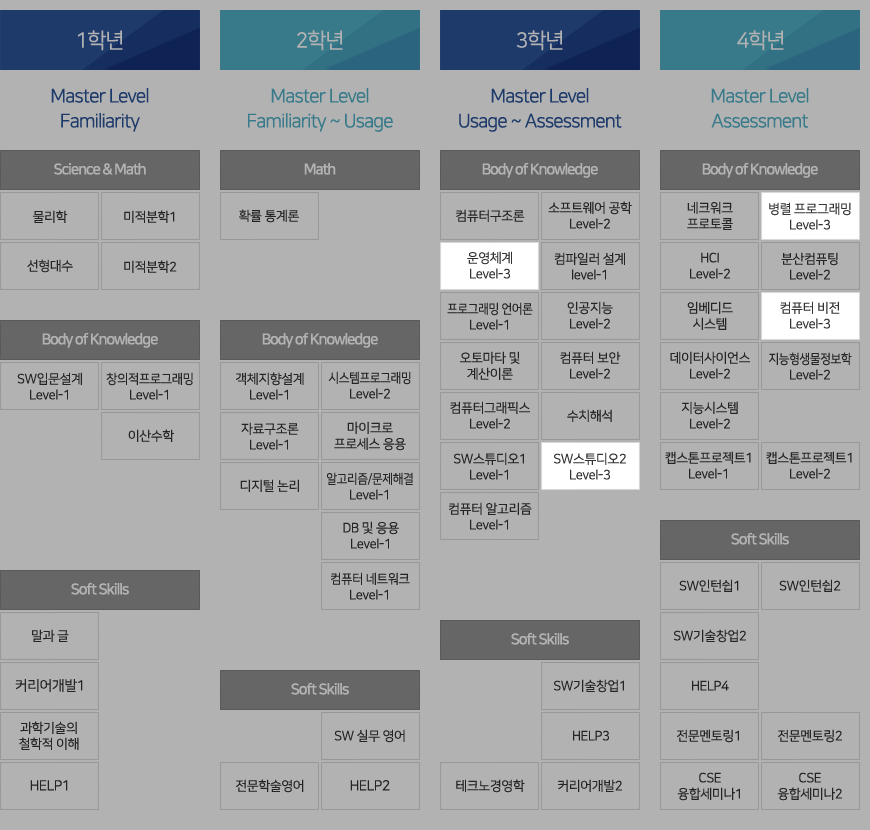
<style>
.page{position:relative;width:870px;height:830px;background:#b2b2b2}
.page>*{position:absolute;margin:0}
.t1{font:21px "NanumSquareR";letter-spacing:-0.05em;color:#b2b2b2}
.t2{font:19px/25px "NanumSquareR";letter-spacing:-0.05em;color:#1e3a6a}
.t3{font:19px/25px "NanumSquareR";letter-spacing:-0.05em;color:#387a8a}
.t4{font:15px "NanumSquareB";letter-spacing:-0.075em;color:#b2b2b2}
.t5{font:13px "NanumSquareR";letter-spacing:-0.025em;color:#333333}
.t6{font:13px/16px "NanumSquareR";letter-spacing:-0.025em;color:#333333}
.t7{font:13px/16px "NanumSquareR";letter-spacing:-0.025em;color:#333333;scale:0.9 1}
.t8{font:13px/16px "NanumSquareR";letter-spacing:-0.025em;color:#333333;scale:0.95 1}
.t9{font:14px "NanumSquareR";letter-spacing:-0.025em;color:#333333}
</style>
<div class="page">
<p class="t1" style="left:77px;top:30px;width:46px;height:21px">1학년</p>
<p class="t1" style="left:297px;top:30px;width:46px;height:21px">2학년</p>
<p class="t1" style="left:516px;top:30px;width:47px;height:21px">3학년</p>
<p class="t1" style="left:737px;top:30px;width:47px;height:21px">4학년</p>
<p class="t2" style="left:51px;top:88px;width:98px;height:44px;text-align:center">Master Level<br>Familiarity</p>
<p class="t3" style="left:248px;top:88px;width:145px;height:44px;text-align:center">Master Level<br>Familiarity ~ Usage</p>
<p class="t2" style="left:459px;top:88px;width:163px;height:44px;text-align:center">Master Level<br>Usage ~ Assessment</p>
<p class="t3" style="left:711px;top:88px;width:98px;height:40px;text-align:center">Master Level<br>Assessment</p>
<p class="t4" style="left:54px;top:163px;width:92px;height:12px">Science &amp; Math</p>
<p class="t4" style="left:304px;top:163px;width:32px;height:12px">Math</p>
<p class="t4" style="left:482px;top:162px;width:116px;height:16px">Body of Knowledge</p>
<p class="t4" style="left:702px;top:162px;width:116px;height:16px">Body of Knowledge</p>
<p class="t5" style="left:239px;top:209px;width:60px;height:14px">확률 통계론</p>
<p class="t5" style="left:456px;top:209px;width:69px;height:13px">컴퓨터구조론</p>
<p class="t6" style="left:548px;top:201px;width:84px;height:28px;text-align:center">소프트웨어 공학<br>Level-2</p>
<p class="t6" style="left:687px;top:201px;width:46px;height:29px;text-align:center">네크워크<br>프로토콜</p>
<p class="t6" style="left:769px;top:202px;width:82px;height:28px;text-align:center">병렬 프로그래밍<br>Level-3</p>
<p class="t5" style="left:33px;top:210px;width:35px;height:13px">물리학</p>
<p class="t5" style="left:124px;top:210px;width:51px;height:13px">미적분학1</p>
<p class="t6" style="left:467px;top:251px;width:45px;height:28px;text-align:center">운영체계<br>Level-3</p>
<p class="t6" style="left:554px;top:252px;width:71px;height:28px;text-align:center">컴파일러 설계<br>level-1</p>
<p class="t6" style="left:690px;top:252px;width:40px;height:27px;text-align:center">HCI<br>Level-2</p>
<p class="t6" style="left:781px;top:252px;width:57px;height:28px;text-align:center">분산컴퓨팅<br>Level-2</p>
<p class="t5" style="left:27px;top:259px;width:46px;height:14px">선형대수</p>
<p class="t5" style="left:124px;top:260px;width:53px;height:13px">미적분학2</p>
<p class="t7" style="left:447px;top:302px;width:86px;height:28px;text-align:center">프로그래밍 언어론<br><span class="t6">Level-1</span></p>
<p class="t6" style="left:567px;top:301px;width:46px;height:28px;text-align:center">인공지능<br>Level-2</p>
<p class="t6" style="left:687px;top:301px;width:46px;height:29px;text-align:center">임베디드<br>시스템</p>
<p class="t6" style="left:780px;top:301px;width:60px;height:28px;text-align:center">컴퓨터 비전<br>Level-3</p>
<p class="t4" style="left:42px;top:332px;width:116px;height:16px">Body of Knowledge</p>
<p class="t4" style="left:262px;top:332px;width:116px;height:16px">Body of Knowledge</p>
<p class="t6" style="left:460px;top:351px;width:60px;height:29px;text-align:center">오토마타 및<br>계산이론</p>
<p class="t6" style="left:560px;top:351px;width:61px;height:28px;text-align:center">컴퓨터 보안<br>Level-2</p>
<p class="t6" style="left:670px;top:351px;width:80px;height:28px;text-align:center">데이터사이언스<br>Level-2</p>
<p class="t7" style="left:769px;top:352px;width:83px;height:28px;text-align:center">지능형생물정보학<br><span class="t6">Level-2</span></p>
<p class="t6" style="left:17px;top:372px;width:65px;height:28px;text-align:center">SW입문설계<br>Level-1</p>
<p class="t8" style="left:106px;top:372px;width:87px;height:28px;text-align:center">창의적프로그래밍<br><span class="t6">Level-1</span></p>
<p class="t6" style="left:236px;top:372px;width:68px;height:28px;text-align:center">객체지향설계<br>Level-1</p>
<p class="t7" style="left:328px;top:371px;width:83px;height:28px;text-align:center">시스템프로그래밍<br><span class="t6">Level-2</span></p>
<p class="t6" style="left:450px;top:401px;width:80px;height:28px;text-align:center">컴퓨터그래픽스<br>Level-2</p>
<p class="t6" style="left:681px;top:401px;width:57px;height:28px;text-align:center">지능시스템<br>Level-2</p>
<p class="t5" style="left:567px;top:409px;width:45px;height:13px">수치해석</p>
<p class="t6" style="left:241px;top:422px;width:58px;height:28px;text-align:center">자료구조론<br>Level-1</p>
<p class="t6" style="left:334px;top:421px;width:72px;height:30px;text-align:center">마이크로<br>프로세스 응용</p>
<p class="t5" style="left:128px;top:429px;width:46px;height:13px">이산수학</p>
<p class="t6" style="left:454px;top:452px;width:70px;height:28px;text-align:center">SW스튜디오1<br>Level-1</p>
<p class="t6" style="left:554px;top:452px;width:72px;height:28px;text-align:center">SW스튜디오2<br>Level-3</p>
<p class="t6" style="left:665px;top:451px;width:86px;height:28px;text-align:center">캡스톤프로젝트1<br>Level-1</p>
<p class="t6" style="left:766px;top:451px;width:86px;height:28px;text-align:center">캡스톤프로젝트1<br>Level-2</p>
<p class="t7" style="left:327px;top:472px;width:86px;height:28px;text-align:center">알고리즘/문제해결<br><span class="t6">Level-1</span></p>
<p class="t5" style="left:240px;top:479px;width:59px;height:13px">디지털 논리</p>
<p class="t6" style="left:449px;top:502px;width:83px;height:28px;text-align:center">컴퓨터 알고리즘<br>Level-1</p>
<p class="t6" style="left:343px;top:521px;width:56px;height:28px;text-align:center">DB 및 응용<br>Level-1</p>
<p class="t4" style="left:731px;top:532px;width:58px;height:13px">Soft Skills</p>
<p class="t4" style="left:71px;top:582px;width:58px;height:13px">Soft Skills</p>
<p class="t8" style="left:331px;top:572px;width:79px;height:28px;text-align:center">컴퓨터 네트워크<br><span class="t6">Level-1</span></p>
<p class="t5" style="left:679px;top:579px;width:60px;height:13px">SW인턴쉽1</p>
<p class="t5" style="left:779px;top:579px;width:62px;height:13px">SW인턴쉽2</p>
<p class="t5" style="left:32px;top:629px;width:37px;height:13px">말과 글</p>
<p class="t5" style="left:674px;top:629px;width:72px;height:14px">SW기술창업2</p>
<p class="t4" style="left:511px;top:632px;width:58px;height:13px">Soft Skills</p>
<p class="t9" style="left:15px;top:679px;width:68px;height:13px">커리어개발1</p>
<p class="t4" style="left:291px;top:682px;width:58px;height:13px">Soft Skills</p>
<p class="t5" style="left:554px;top:679px;width:70px;height:14px">SW기술창업1</p>
<p class="t5" style="left:692px;top:680px;width:37px;height:11px">HELP4</p>
<p class="t6" style="left:19px;top:721px;width:60px;height:29px;text-align:center">과학기술의<br>철학적 이해</p>
<p class="t5" style="left:334px;top:729px;width:71px;height:14px">SW 실무 영어</p>
<p class="t5" style="left:573px;top:730px;width:36px;height:11px">HELP3</p>
<p class="t5" style="left:677px;top:729px;width:62px;height:14px">전문멘토링1</p>
<p class="t5" style="left:778px;top:729px;width:64px;height:14px">전문멘토링2</p>
<p class="t6" style="left:677px;top:772px;width:63px;height:29px;text-align:center">CSE<br>융합세미나1</p>
<p class="t6" style="left:777px;top:772px;width:65px;height:29px;text-align:center">CSE<br>융합세미나2</p>
<p class="t9" style="left:30px;top:780px;width:38px;height:11px">HELP1</p>
<p class="t5" style="left:236px;top:779px;width:68px;height:14px">전문학술영어</p>
<p class="t9" style="left:350px;top:780px;width:40px;height:11px">HELP2</p>
<p class="t5" style="left:456px;top:779px;width:69px;height:14px">테크노경영학</p>
<p class="t5" style="left:558px;top:779px;width:64px;height:13px">커리어개발2</p>
</div>
